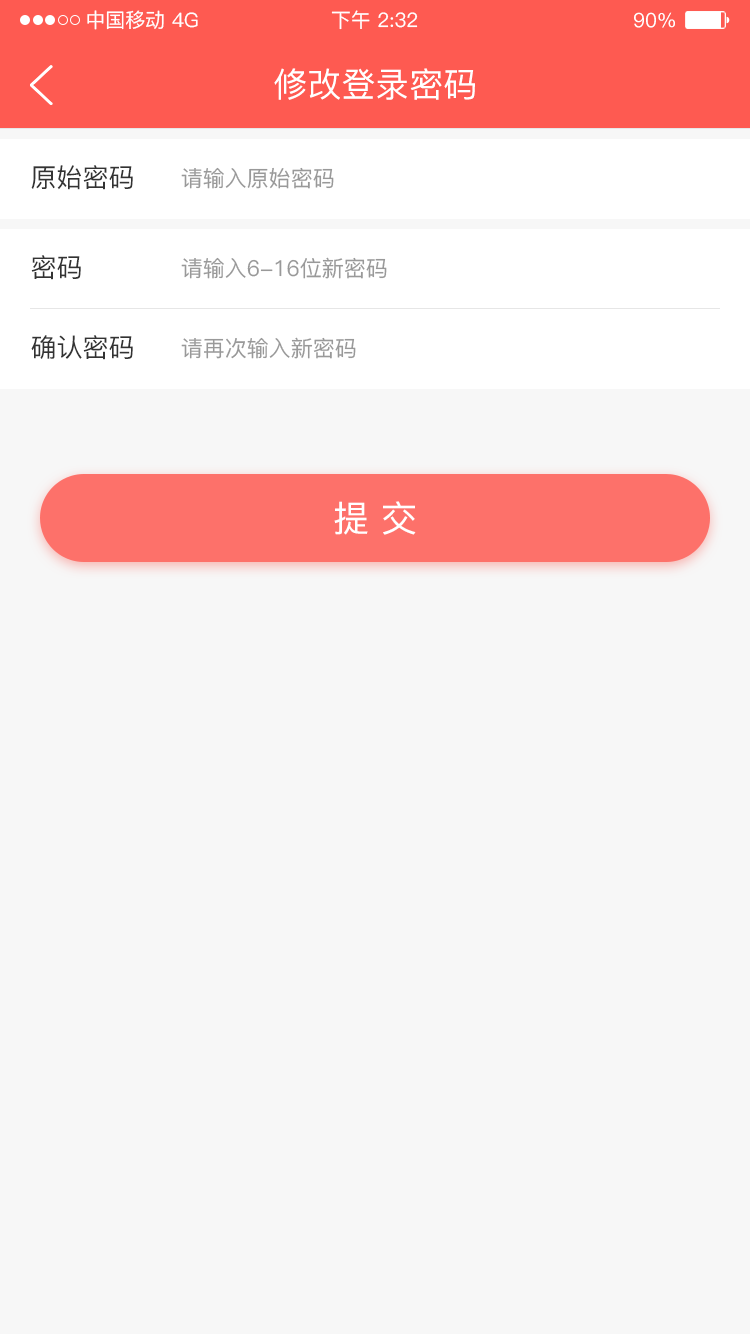
<style>
.page{position:relative;width:750px;height:1334px;background:#f7f7f7}
.page>*{position:absolute;margin:0}
.t1{font:20px "PingFang-SC-Medium";color:#ffffff}
.t2{font:34px "PingFang-SC-Medium";color:#ffffff}
.t3{font:26px "PingFang-SC-Medium";color:#333333}
.t4{font:22px "PingFang-SC-Medium";color:#999999}
.t5{font:36px "PingFang-SC-Medium";color:#ffffff}
</style>
<div class="page">
<p class="t1" style="left:87px;top:10px;width:77px;height:20px">中国移动</p>
<p class="t1" style="left:172px;top:12px;width:26px;height:16px">4G</p>
<p class="t1" style="left:331px;top:10px;width:87px;height:20px">下午 2:32</p>
<p class="t1" style="left:634px;top:12px;width:41px;height:16px">90%</p>
<p class="t2" style="left:274px;top:68px;width:201px;height:32px">修改登录密码</p>
<p class="t3" style="left:31px;top:165px;width:102px;height:25px">原始密码</p>
<p class="t4" style="left:181px;top:167px;width:153px;height:22px">请输入原始密码</p>
<p class="t3" style="left:31px;top:255px;width:50px;height:25px">密码</p>
<p class="t4" style="left:181px;top:257px;width:206px;height:22px">请输入6-16位新密码</p>
<p class="t3" style="left:31px;top:335px;width:102px;height:25px">确认密码</p>
<p class="t4" style="left:181px;top:337px;width:175px;height:22px">请再次输入新密码</p>
<p class="t5" style="left:334px;top:501px;width:82px;height:34px">提 交</p>
</div>
